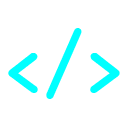
<style>
.page{position:relative;width:128px;height:128px;background:#ffffff}
.page>*{position:absolute;margin:0}
.t1{font:83.3px "Chalkboard";color:#00ffff}
</style>
<div class="page">
<p class="t1" style="left:8px;top:28px;width:112px;height:71px">&lt;/&gt;</p>
</div>
